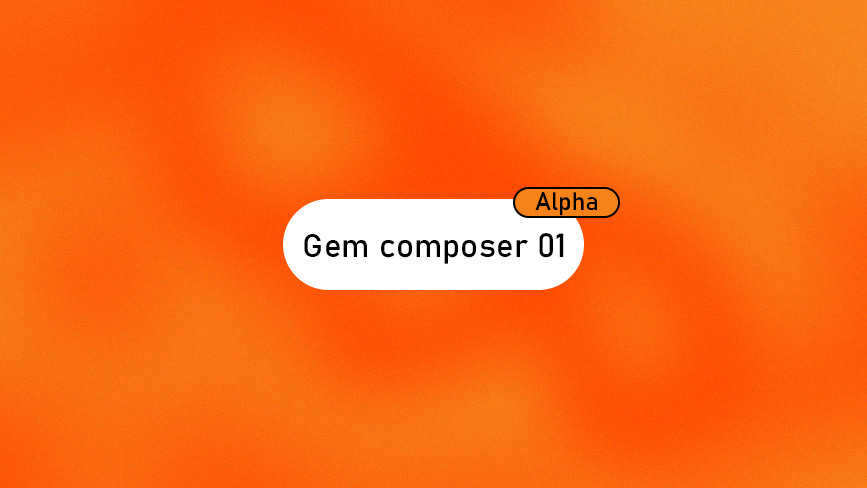
<style>
.page{position:relative;width:867px;height:488px}
.page>*{position:absolute;margin:0}
.t1{font:25px "Bahnschrift_506.000wght";color:#000000}
.t2{font:33.3px "Bahnschrift";color:#000000}
</style>
<div class="page">
<p class="t1" style="left:535px;top:192px;width:62px;height:24px">Alpha</p>
<p class="t2" style="left:304px;top:233px;width:260px;height:31px">Gem composer 01</p>
</div>
